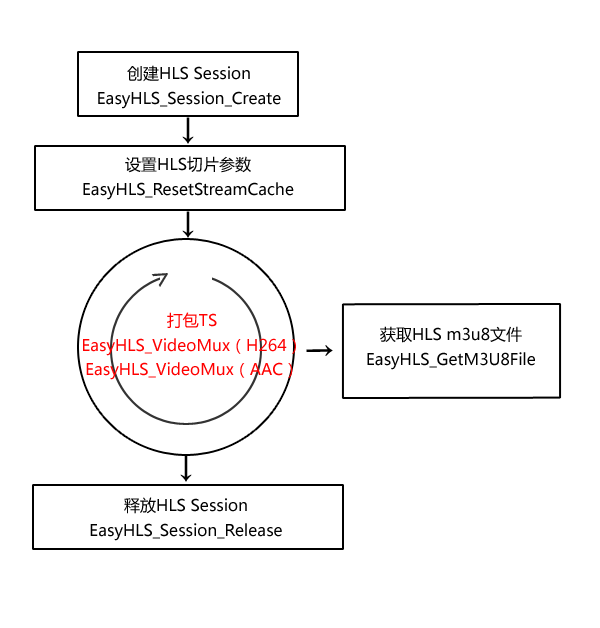
<style>
.page{position:relative;width:600px;height:628px;background:#ffffff}
.page>*{position:absolute;margin:0}
.t1{font:16px/24.6px "MicrosoftYaHei";color:#000000}
.t2{font:30px "MicrosoftYaHei";color:#000000}
.t3{font:30px "MicrosoftYaHei";color:#333333}
.t4{font:16px/24.6px "MicrosoftYaHei";color:#ff0000}
</style>
<div class="page">
<p class="t1" style="left:98px;top:65px;width:183px;height:44px;text-align:center">创建HLS Session<br>EasyHLS_Session_Create</p>
<p class="t2" style="left:182px;top:117px;width:12px;height:27px">↓</p>
<p class="t1" style="left:83px;top:156px;width:211px;height:44px;text-align:center">设置HLS切片参数<br>EasyHLS_ResetStreamCache</p>
<p class="t2" style="left:182px;top:211px;width:12px;height:27px">↓</p>
<p class="t3" style="left:151px;top:273px;width:17px;height:14px;rotate:-33deg">&gt;</p>
<p class="t4" style="left:83px;top:312px;width:213px;height:68px;text-align:center">打包TS<br>EasyHLS_VideoMux（H264）<br>EasyHLS_VideoMux（AAC）</p>
<p class="t1" style="left:367px;top:326px;width:168px;height:44px;text-align:center">获取HLS m3u8文件<br>EasyHLS_GetM3U8File</p>
<p class="t2" style="left:306px;top:345px;width:27px;height:11px;rotate:-90deg">↓</p>
<p class="t2" style="left:180px;top:455px;width:12px;height:27px">↓</p>
<p class="t1" style="left:90px;top:497px;width:192px;height:44px;text-align:center">释放HLS Session<br>EasyHLS_Session_Release</p>
</div>
